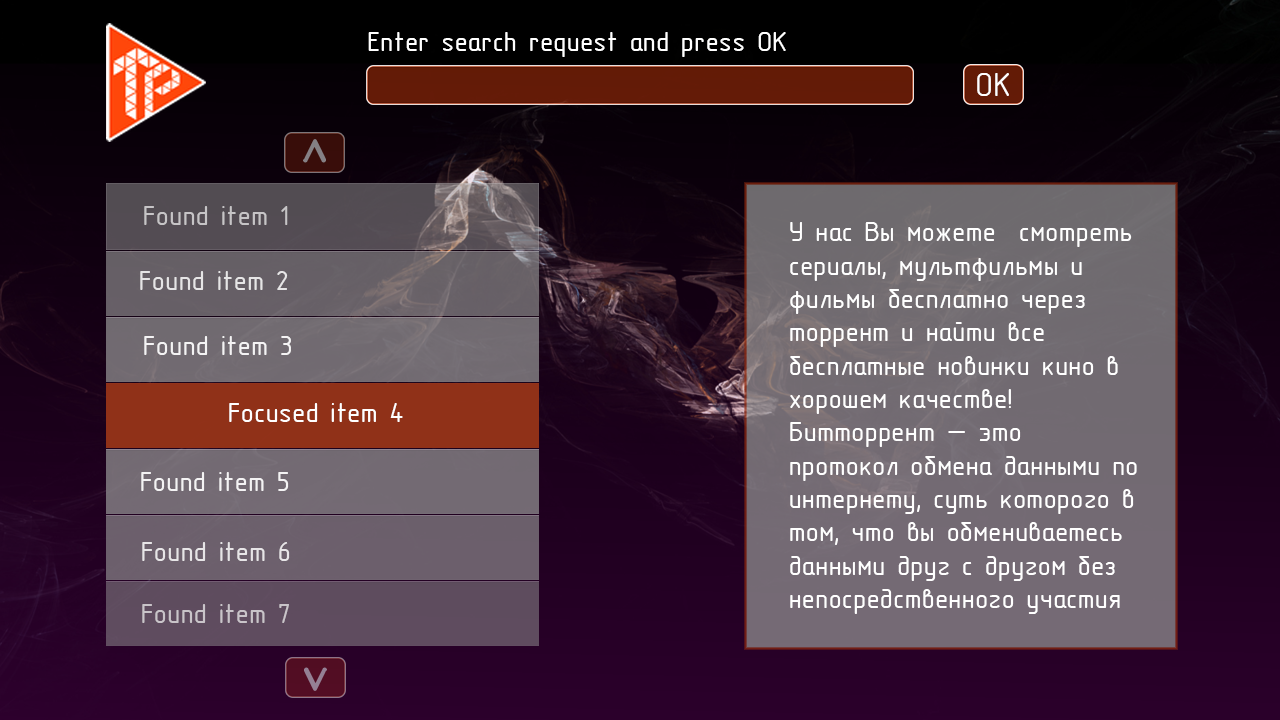
<style>
.page{position:relative;width:1280px;height:720px}
.page>*{position:absolute;margin:0}
.t1{font:27.8px "GOSTTypeBU";color:#ffffff}
.t2{font:33.3px "GOSTTypeBU";color:#ffffff}
.t3{font:27.8px "GOSTTypeBU";color:#c6c4c6}
.t4{font:27.8px "GOSTTypeBU";color:#e6e5e6}
.t5{font:27.8px "GOSTTypeBU";color:#e7e5e7}
.t6{font:27.8px "GOSTTypeBU";color:#c9c4c9}
</style>
<div class="page">
<p class="t1" style="left:368px;top:32px;width:418px;height:25px">Enter search request and press OK</p>
<p class="t2" style="left:977px;top:73px;width:32px;height:23px">ОК</p>
<p class="t3" style="left:144px;top:206px;width:144px;height:19px">Found item 1</p>
<p class="t1" style="left:790px;top:222px;width:347px;height:392px">У нас Вы можете  смотреть сериалы, мультфильмы и фильмы бесплатно через торрент и найти все бесплатные новинки кино в хорошем качестве!<br>Битторрент — это протокол обмена данными по интернету, суть которого в том, что вы обмениваетесь данными друг с другом без непосредственного участия трекера, который лишь хранит статистическую и другую необходимую информацию. Отсюда основной принцип жизнеспособности трекера — отдать столько же, сколько скачал.</p>
<p class="t4" style="left:140px;top:271px;width:148px;height:19px">Found item 2</p>
<p class="t1" style="left:144px;top:336px;width:147px;height:19px;opacity:0.9">Found item 3</p>
<p class="t1" style="left:229px;top:403px;width:174px;height:19px">Focused item 4</p>
<p class="t1" style="left:141px;top:472px;width:148px;height:19px;opacity:0.9">Found item 5</p>
<p class="t5" style="left:142px;top:542px;width:148px;height:19px">Found item 6</p>
<p class="t6" style="left:142px;top:604px;width:147px;height:19px">Found item 7</p>
</div>
